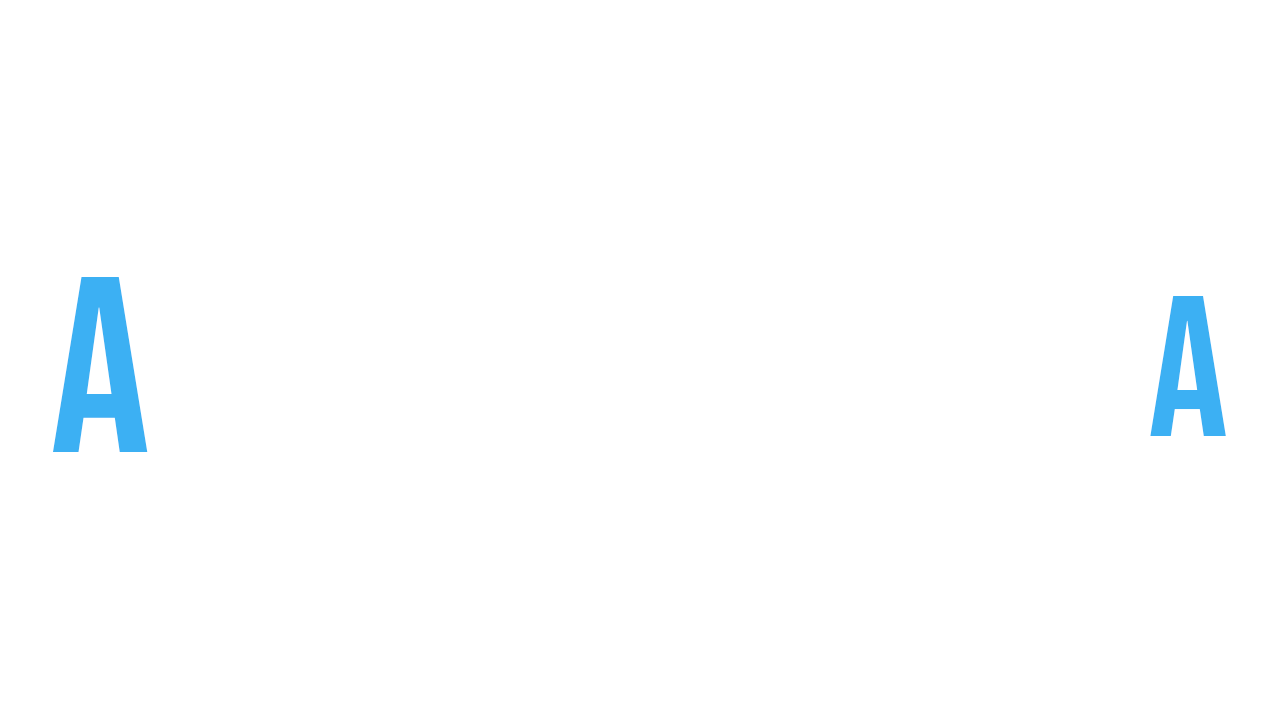
<style>
.page{position:relative;width:1280px;height:720px;background:#ffffff}
.page>*{position:absolute;margin:0}
.t1{font:250px "BebasNeue-Regular";letter-spacing:0.155em;color:#3cb0f3}
.t2{font:200px "BebasNeue-Regular";letter-spacing:0.155em;color:#3cb0f3}
</style>
<div class="page">
<p class="t1" style="left:53px;top:277px;width:95px;height:175px">A</p>
<p class="t2" style="left:1150px;top:296px;width:76px;height:140px">A</p>
</div>
